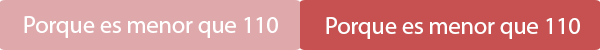
<style>
.page{position:relative;width:600px;height:50px;background:#c65150}
.page>*{position:absolute;margin:0}
.t1{font:24px "MyriadHebrew-Regular";color:#ffffff}
</style>
<div class="page">
<p class="t1" style="left:24px;top:16px;width:254px;height:22px">Porque es menor que 110</p>
<p class="t1" style="left:326px;top:17px;width:254px;height:22px">Porque es menor que 110</p>
</div>
